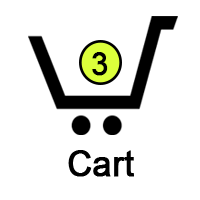
<style>
.page{position:relative;width:200px;height:200px;background:#ffffff}
.page>*{position:absolute;margin:0}
.t1{font:31.7px "ArialMT";color:#000000;font-weight:bold;scale:0.94 1}
.t2{font:35.8px "ArialMT";color:#000000;font-weight:bold;scale:0.95 1}
</style>
<div class="page">
<p class="t1" style="left:92px;top:52px;width:16px;height:24px">3</p>
<p class="t2" style="left:68px;top:150px;width:66px;height:27px">Cart</p>
</div>
